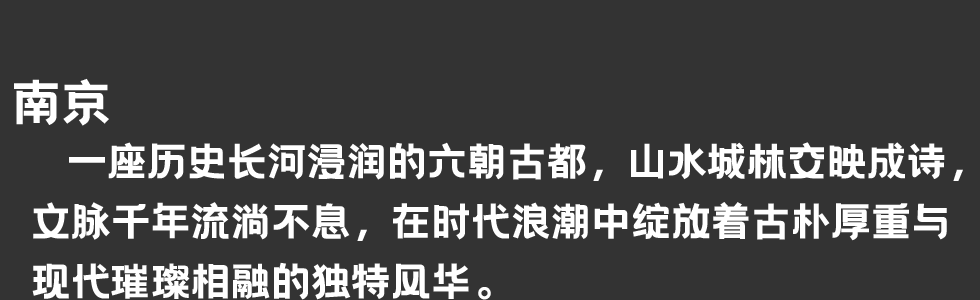
<style>
.page{position:relative;width:980px;height:300px;background:#333333}
.page>*{position:absolute;margin:0}
.t1{font:50px "HelloFont-WenYiHei";color:#ffffff}
.t2{font:40px/60px "HelloFont-WenYiHei";color:#ffffff}
</style>
<div class="page">
<p class="t1" style="left:14px;top:78px;width:95px;height:48px">南京</p>
<p class="t2" style="left:32px;top:142px;width:931px;height:158px">一座历史长河浸润的六朝古都，山水城林交映成诗，<br>文脉千年流淌不息，在时代浪潮中绽放着古朴厚重与<br>现代璀璨相融的独特风华。</p>
</div>
